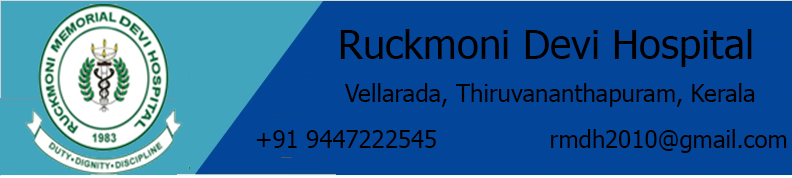
<style>
.page{position:relative;width:792px;height:178px;background:#034599}
.page>*{position:absolute;margin:0}
.t1{font:40px "Tahoma";color:#050000}
.t2{font:24px "Tahoma";color:#050000}
</style>
<div class="page">
<p class="t1" style="left:340px;top:29px;width:412px;height:38px">Ruckmoni Devi Hospital</p>
<p class="t2" style="left:345px;top:83px;width:410px;height:24px">Vellarada, Thiruvananthapuram, Kerala</p>
<p class="t2" style="left:256px;top:129px;width:531px;height:24px">+91 9447222545               rmdh2010@gmail.com</p>
</div>
